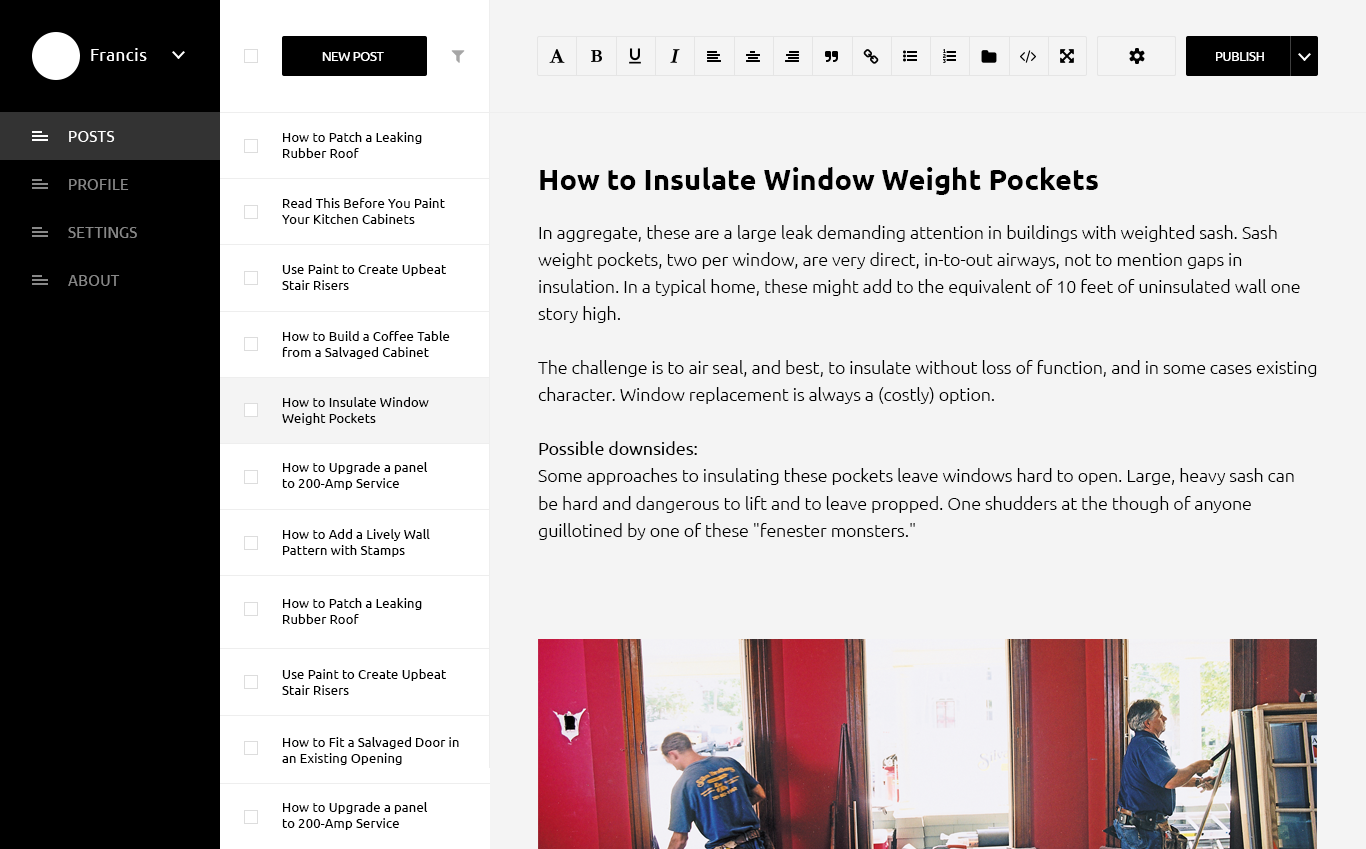
<style>
.page{position:relative;width:1366px;height:849px;background:#f4f4f4}
.page>*{position:absolute;margin:0}
.t1{font:16.7px "Ubuntu";letter-spacing:0.04em;color:#ffffff}
.t2{font:12.5px "Ubuntu";color:#ffffff;text-transform:uppercase}
.t3{font:14.6px "Ubuntu";letter-spacing:0.04em;color:#ffffff;text-transform:uppercase}
.t4{font:13.3px "Ubuntu";color:#000000}
.t5{font:29.2px "Ubuntu-Bold";color:#000000}
.t6{font:14.6px "Ubuntu";letter-spacing:0.04em;color:#888888;text-transform:uppercase}
.t7{font:17.7px/27.1px "Ubuntu-Light";color:#000000}
.t8{font:17.7px/27.1px "Ubuntu";color:#000000}
</style>
<div class="page">
<p class="t1" style="left:91px;top:48px;width:56px;height:13px">Francis</p>
<p class="t2" style="left:322px;top:52px;width:62px;height:9px">new post</p>
<p class="t2" style="left:1216px;top:52px;width:48px;height:9px">Publish</p>
<p class="t3" style="left:69px;top:131px;width:46px;height:11px">Posts</p>
<p class="t4" style="left:283px;top:132px;width:139px;height:26px">How to Patch a Leaking Rubber Roof</p>
<p class="t5" style="left:540px;top:167px;width:558px;height:28px">How to Insulate Window Weight Pockets</p>
<p class="t6" style="left:69px;top:179px;width:60px;height:11px">Profile</p>
<p class="t4" style="left:282px;top:198px;width:163px;height:26px">Read This Before You Paint Your Kitchen Cabinets</p>
<p class="t6" style="left:68px;top:227px;width:69px;height:11px">Settings</p>
<p class="t7" style="left:538px;top:225px;width:779px;height:315px">In aggregate, these are a large leak demanding attention in buildings with weighted sash. Sash weight pockets, two per window, are very direct, in-to-out airways, not to mention gaps in insulation. In a typical home, these might add to the equivalent of 10 feet of uninsulated wall one story high.<br><br>The challenge is to air seal, and best, to insulate without loss of function, and in some cases existing character. Window replacement is always a (costly) option.<br><br><span class="t8">Possible downsides:</span><br>Some approaches to insulating these pockets leave windows hard to open. Large, heavy sash can be hard and dangerous to lift and to leave propped. One shudders at the though of anyone guillotined by one of these "fenester monsters."</p>
<p class="t4" style="left:282px;top:264px;width:164px;height:26px">Use Paint to Create Upbeat Stair Risers</p>
<p class="t6" style="left:68px;top:275px;width:52px;height:11px">About</p>
<p class="t4" style="left:282px;top:331px;width:168px;height:28px">How to Build a Coffee Table from a Salvaged Cabinet Door</p>
<p class="t4" style="left:282px;top:397px;width:147px;height:28px">How to Insulate Window Weight Pockets</p>
<p class="t4" style="left:282px;top:462px;width:146px;height:28px">How to Upgrade a panel to 200-Amp Service</p>
<p class="t4" style="left:283px;top:529px;width:147px;height:28px">How to Add a Lively Wall Pattern with Stamps</p>
<p class="t4" style="left:283px;top:598px;width:139px;height:26px">How to Patch a Leaking Rubber Roof</p>
<p class="t4" style="left:282px;top:669px;width:164px;height:26px">Use Paint to Create Upbeat Stair Risers</p>
<p class="t4" style="left:282px;top:737px;width:177px;height:28px">How to Fit a Salvaged Door in an Existing Opening</p>
<p class="t4" style="left:282px;top:802px;width:146px;height:28px">How to Upgrade a panel to 200-Amp Service</p>
</div>
